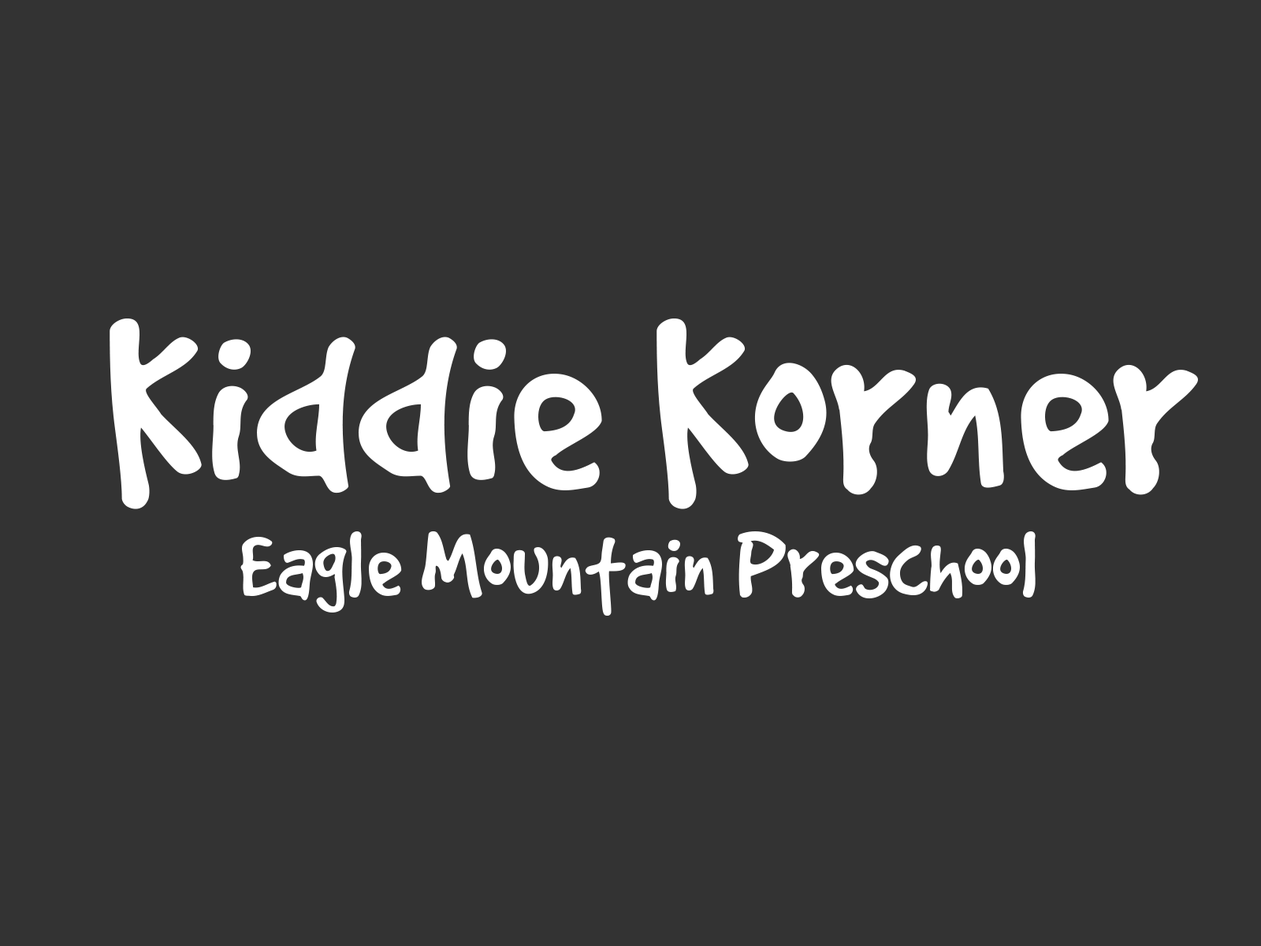
<style>
.page{position:relative;width:1261px;height:946px;background:#333333}
.page>*{position:absolute;margin:0}
.t1{font:275.8px "GoodDog";color:#ffffff}
.t2{font:102.4px "GoodDog";color:#ffffff}
</style>
<div class="page">
<p class="t1" style="left:110px;top:318px;width:1088px;height:191px">Kiddie Korner</p>
<p class="t2" style="left:240px;top:530px;width:796px;height:85px">Eagle Mountain Preschool</p>
</div>
